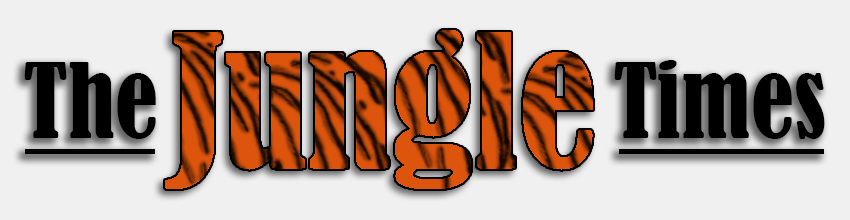
<style>
.page{position:relative;width:850px;height:220px;background:#f0f0f0}
.page>*{position:absolute;margin:0}
.t1{font:96px "BernardMT-Condensed";color:#000000}
</style>
<div class="page">
<p class="t1" style="left:24px;top:62px;width:132px;height:77px">The</p>
<p class="t1" style="left:614px;top:60px;width:211px;height:79px">Times</p>
</div>
